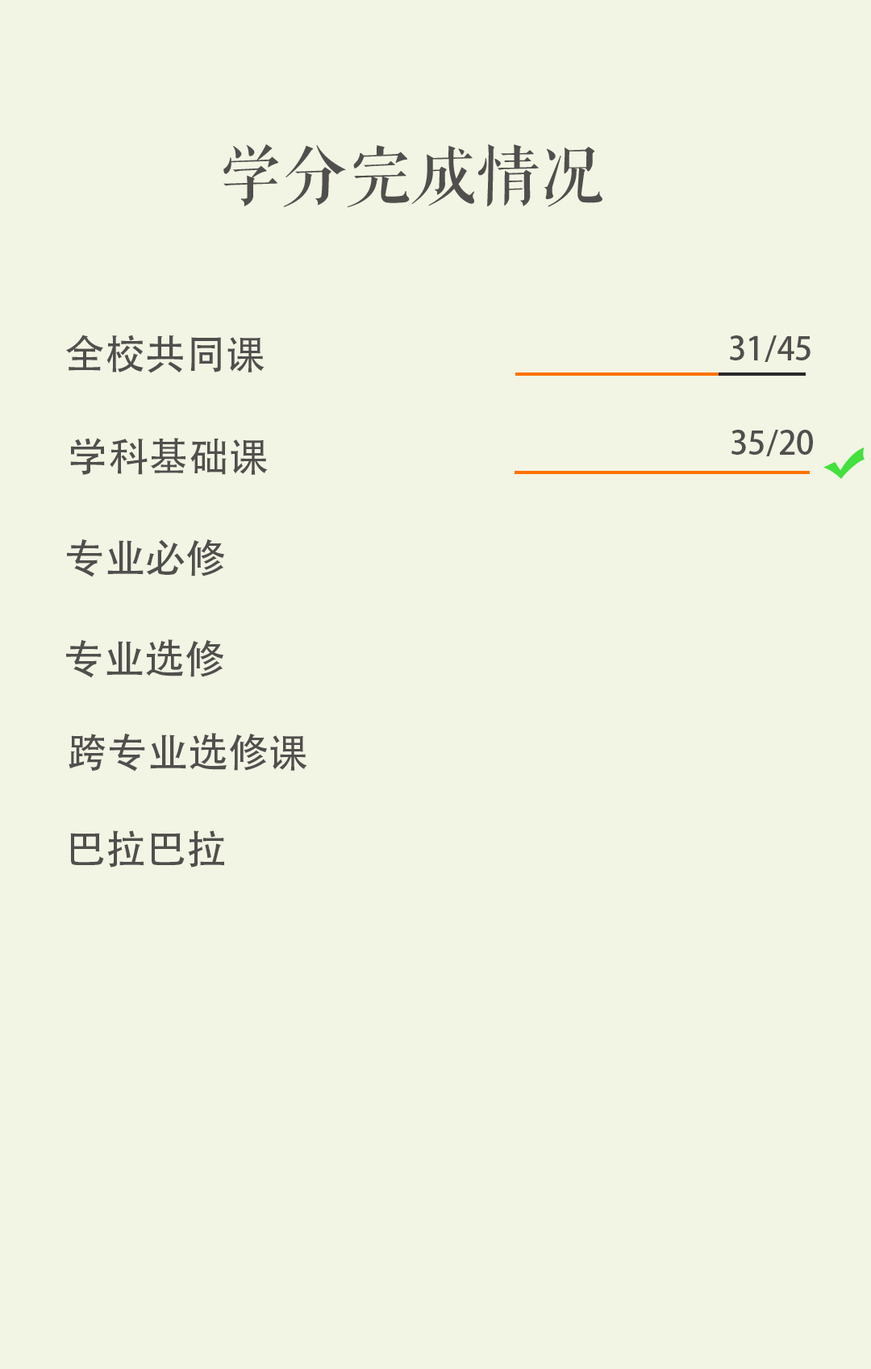
<style>
.page{position:relative;width:871px;height:1369px;background:#f2f4e4}
.page>*{position:absolute;margin:0}
.t1{font:40.3px "AdobeHeitiStd-Regular";color:#514f4d}
.t2{font:32.3px "AdobeHeitiStd-Regular";color:#514f4d}
</style>
<div class="page">
<p class="t1" style="left:65px;top:335px;width:199px;height:38px">全校共同课</p>
<p class="t2" style="left:729px;top:335px;width:81px;height:27px">31/45</p>
<p class="t1" style="left:70px;top:438px;width:198px;height:37px">学科基础课</p>
<p class="t2" style="left:731px;top:430px;width:82px;height:26px">35/20</p>
<p class="t1" style="left:67px;top:539px;width:158px;height:38px">专业必修</p>
<p class="t1" style="left:66px;top:639px;width:158px;height:39px">专业选修</p>
<p class="t1" style="left:69px;top:733px;width:238px;height:39px">跨专业选修课</p>
<p class="t1" style="left:70px;top:831px;width:154px;height:37px">巴拉巴拉</p>
</div>
